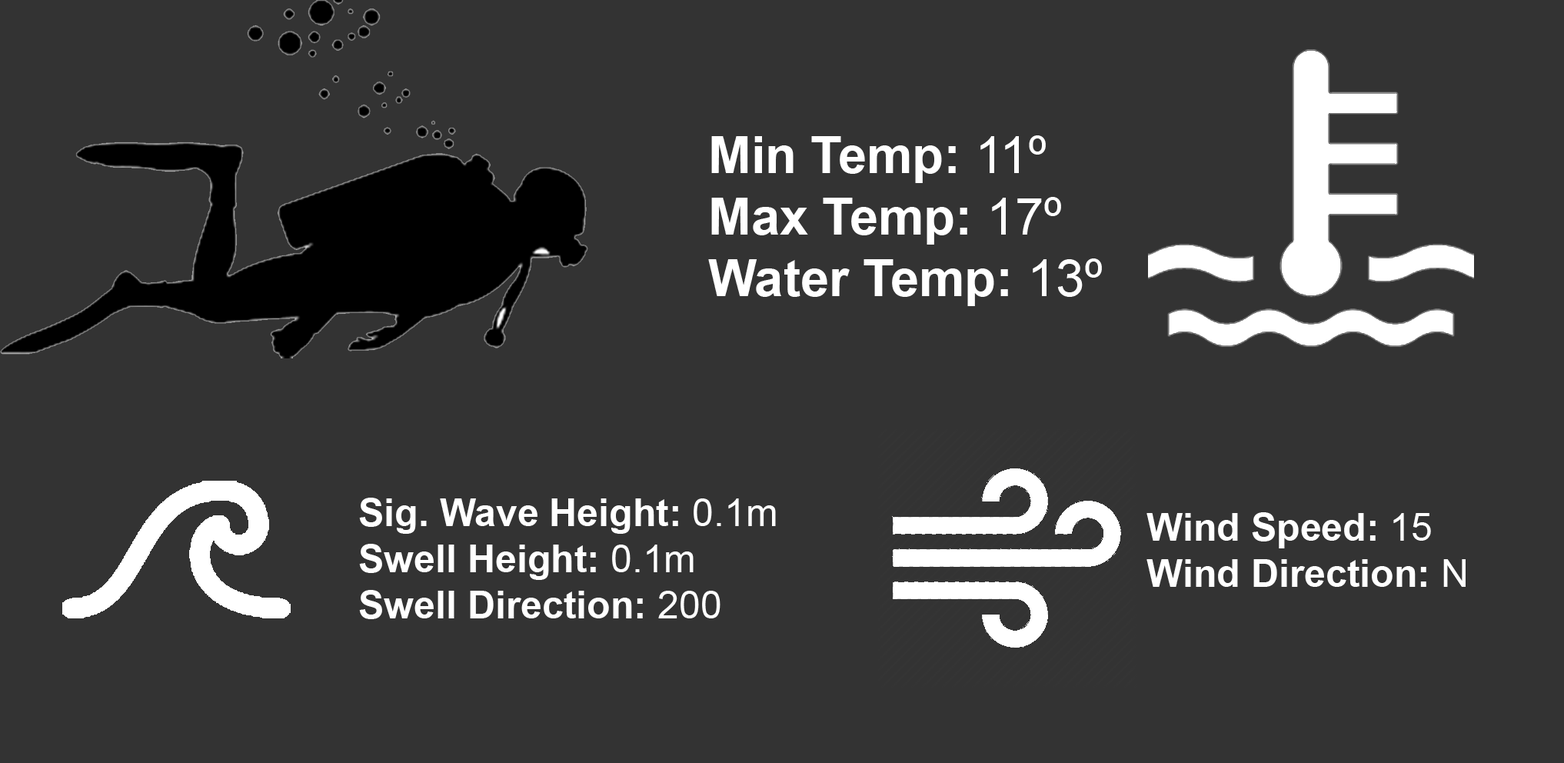
<style>
.page{position:relative;width:1564px;height:763px;background:#333333}
.page>*{position:absolute;margin:0}
.t1{font:51.2px "Arial-BoldMT";color:#ffffff}
.t2{font:51.2px "ArialMT";color:#ffffff}
.t3{font:38.4px "Arial-BoldMT";color:#ffffff}
.t4{font:38.4px "ArialMT";color:#ffffff}
</style>
<div class="page">
<p class="t1" style="left:708px;top:135px;width:394px;height:171px">Min Temp:<span class="t2"> 11º<br></span>Max Temp:<span class="t2"> 17º<br></span>Water Temp:<span class="t2"> 13º</span></p>
<p class="t3" style="left:359px;top:497px;width:417px;height:122px">Sig. Wave Height: <span class="t4">0.1m<br></span>Swell Height: <span class="t4">0.1m<br></span>Swell Direction: <span class="t4">200</span></p>
<p class="t3" style="left:1146px;top:512px;width:319px;height:75px">Wind Speed: <span class="t4">15<br></span>Wind Direction: <span class="t4">N</span></p>
</div>
